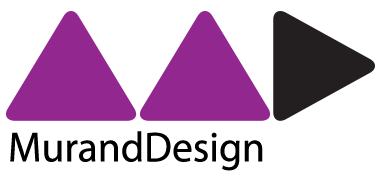
<style>
.page{position:relative;width:383px;height:173px;background:#ffffff}
.page>*{position:absolute;margin:0}
.t1{font:42.3px "MyriadPro-Regular";color:#000000}
</style>
<div class="page">
<p class="t1" style="left:10px;top:131px;width:253px;height:40px">MurandDesign</p>
</div>
